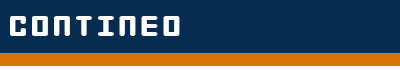
<style>
.page{position:relative;width:400px;height:70px;background:#062c52}
.page>*{position:absolute;margin:0}
.t1{font:30px "AddElectricCity";color:#ffffff;scale:1.06 1}
</style>
<div class="page">
<p class="t1" style="left:10px;top:16px;width:170px;height:20px">CONTINEO</p>
</div>
